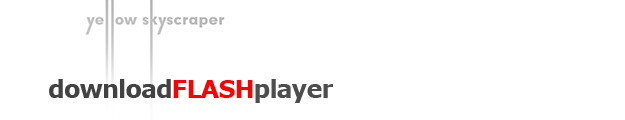
<style>
.page{position:relative;width:625px;height:120px;background:#ffffff}
.page>*{position:absolute;margin:0}
.t1{font:24px "Verdana-Bold";letter-spacing:-0.04em;color:#424242}
.t2{font:24px "Verdana-Bold";letter-spacing:-0.04em;color:#ff0000}
.t3{font:24px "Verdana-Bold";letter-spacing:-0.04em;color:#4d4d4d}
</style>
<div class="page">
<p class="t1" style="left:49px;top:79px;width:284px;height:24px">download<span class="t2">FLASH</span><span class="t3">player</span></p>
</div>
